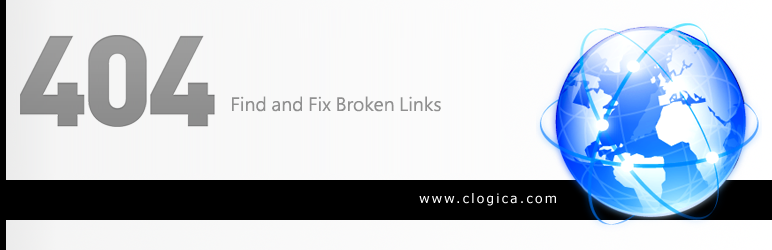
<style>
.page{position:relative;width:772px;height:250px}
.page>*{position:absolute;margin:0}
.t1{font:18px "MicrosoftJhengHeiRegular";color:#909090}
</style>
<div class="page">
<p class="t1" style="left:232px;top:96px;width:209px;height:16px">Find and Fix Broken Links</p>
</div>
